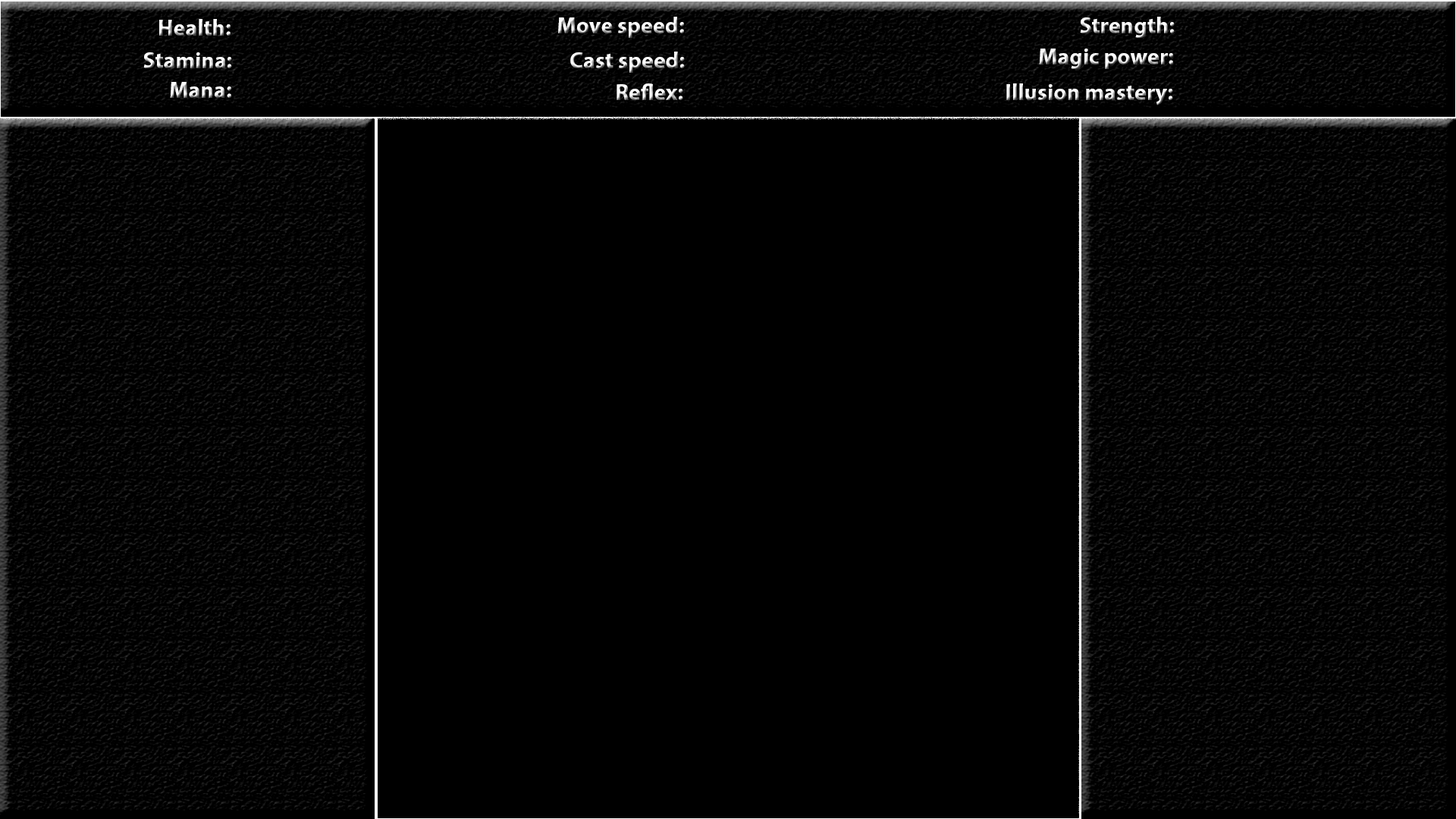
<style>
.page{position:relative;width:1456px;height:819px;background:#000000}
.page>*{position:absolute;margin:0}
.t1{font:22.7px "MyriadPro-Bold"}
</style>
<div class="page">
<p class="t1" style="left:558px;top:17px;width:126px;height:21px">Move speed:</p>
<p class="t1" style="left:1080px;top:17px;width:95px;height:21px">Strength:</p>
<p class="t1" style="left:159px;top:19px;width:72px;height:17px">Health:</p>
<p class="t1" style="left:143px;top:52px;width:89px;height:16px">Stamina:</p>
<p class="t1" style="left:570px;top:52px;width:115px;height:21px">Cast speed:</p>
<p class="t1" style="left:1039px;top:49px;width:134px;height:20px">Magic power:</p>
<p class="t1" style="left:170px;top:82px;width:61px;height:16px">Mana:</p>
<p class="t1" style="left:617px;top:83px;width:66px;height:17px">Reflex:</p>
<p class="t1" style="left:1006px;top:83px;width:167px;height:22px">Illusion mastery:</p>
</div>
